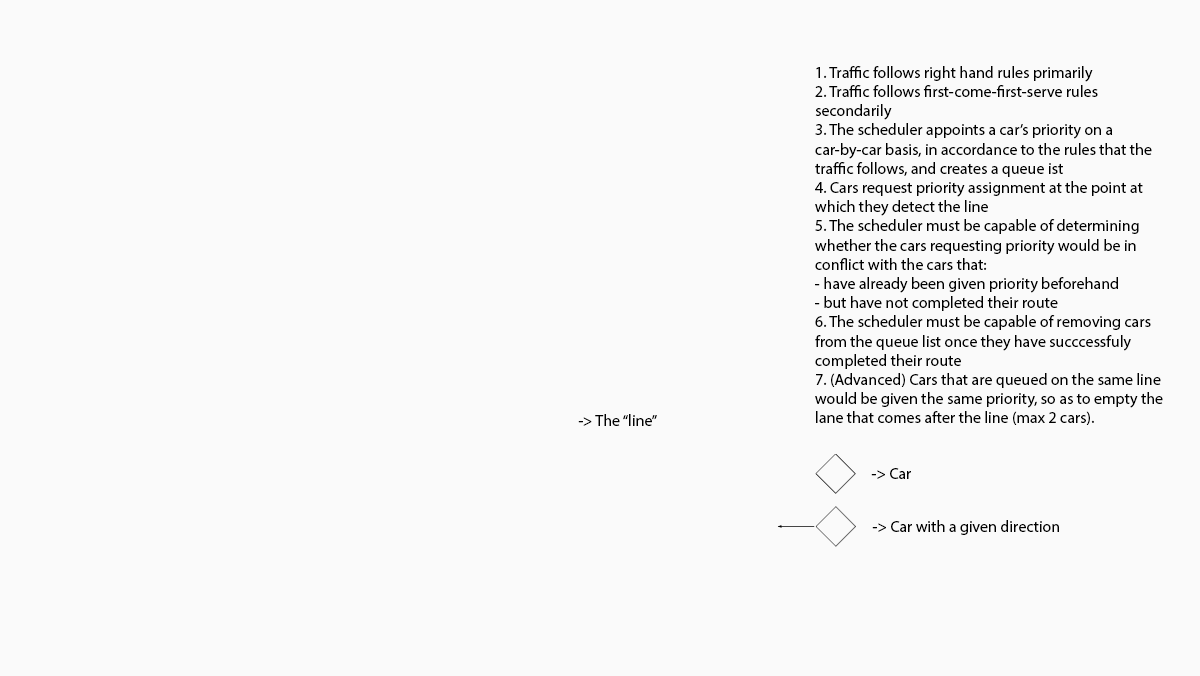
<style>
.page{position:relative;width:1200px;height:676px;background:#fafafa}
.page>*{position:absolute;margin:0}
.t1{font:16px "MyriadPro-Regular";color:#000000}
</style>
<div class="page">
<p class="t1" style="left:815px;top:66px;width:348px;height:359px">1. Traffic follows right hand rules primarily<br>2. Traffic follows first-come-first-serve rules secondarily<br>3. The scheduler appoints a car’s priority on a car-by-car basis, in accordance to the rules that the traffic follows, and creates a queue ist <br>4. Cars request priority assignment at the point at which they detect the line<br>5. The scheduler must be capable of determining whether the cars requesting priority would be in conflict with the cars that: <br>- have already been given priority beforehand <br>- but have not completed their route <br>6. The scheduler must be capable of removing cars from the queue list once they have succcessfuly completed their route<br>7. (Advanced) Cars that are queued on the same line would be given the same priority, so as to empty the lane that comes after the line (max 2 cars).</p>
<p class="t1" style="left:578px;top:414px;width:79px;height:12px">-&gt; The “line”</p>
<p class="t1" style="left:871px;top:468px;width:40px;height:11px">-&gt; Car</p>
<p class="t1" style="left:872px;top:520px;width:187px;height:15px">-&gt; Car with a given direction</p>
</div>
